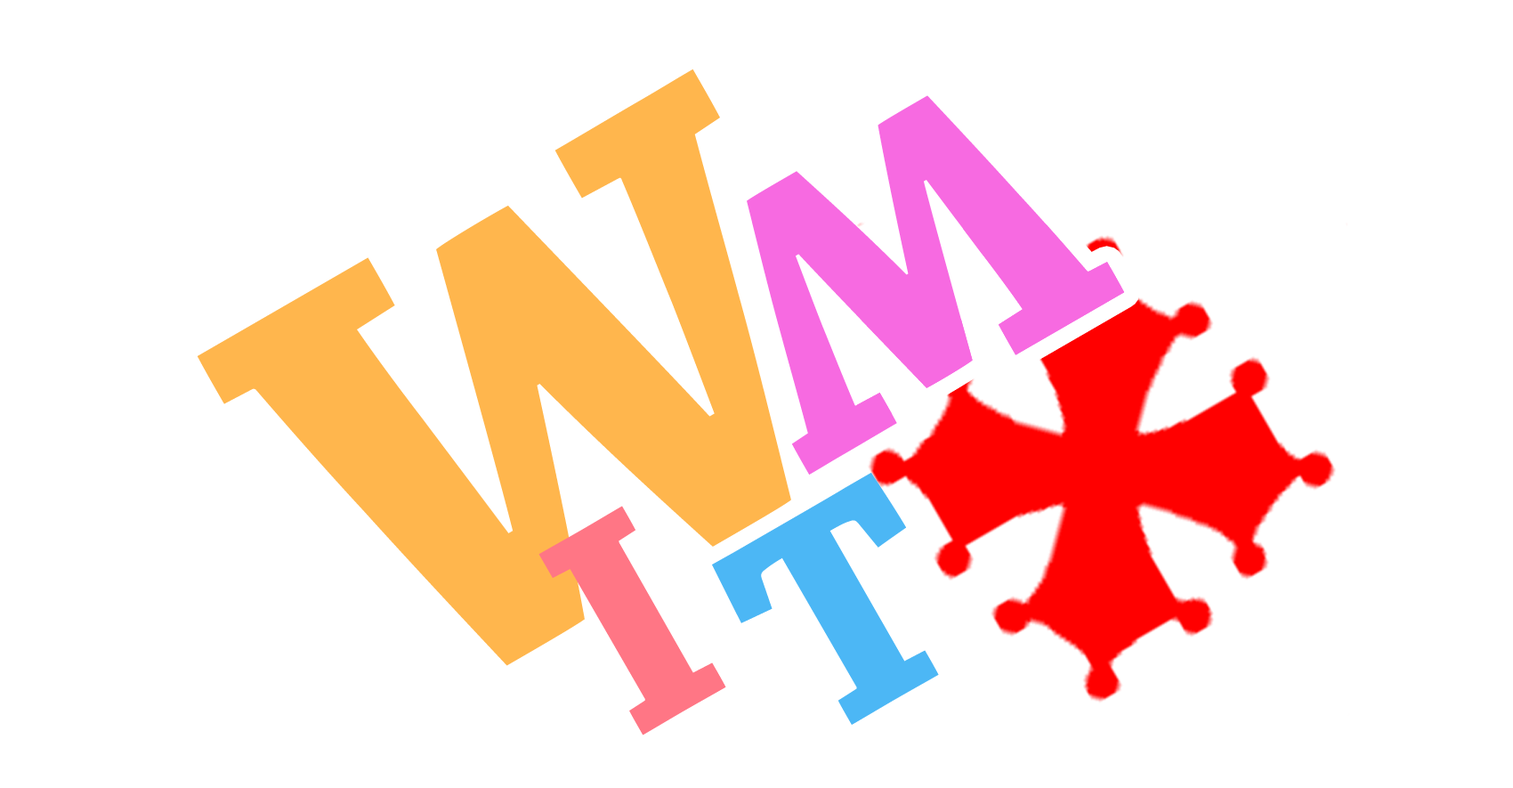
<style>
.page{position:relative;width:1513px;height:788px;background:#ffffff}
.page>*{position:absolute;margin:0}
.t1{font:641px "ChaparralPro-Bold";color:#ffb64d}
.t2{font:407.3px "ChaparralPro-Bold";color:#f76ae1}
.t3{font:320.5px "ChaparralPro-Bold";color:#4cb7f5}
.t4{font:320.5px "ChaparralPro-Bold";color:#ff7685}
</style>
<div class="page">
<p class="t1" style="left:197px;top:69px;width:594px;height:597px;rotate:-30deg">W</p>
<p class="t2" style="left:747px;top:95px;width:377px;height:380px;rotate:150deg">W</p>
<p class="t2" style="left:747px;top:95px;width:377px;height:380px;rotate:150deg">W</p>
<p class="t3" style="left:712px;top:473px;width:227px;height:252px;rotate:-30deg">T</p>
<p class="t4" style="left:539px;top:506px;width:187px;height:229px;rotate:-30deg">I</p>
</div>
